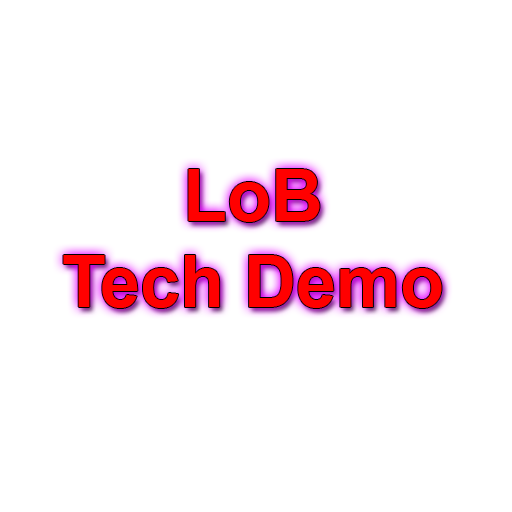
<style>
.page{position:relative;width:512px;height:512px;background:#ffffff}
.page>*{position:absolute;margin:0}
.t1{font:72px "Arial-BoldMT";color:#ff0000}
</style>
<div class="page">
<p class="t1" style="left:63px;top:169px;width:379px;height:139px;text-align:center">LoB<br>Tech Demo</p>
</div>
